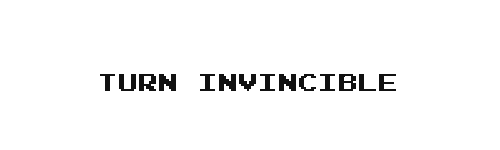
<style>
.page{position:relative;width:500px;height:150px;background:#ffffff}
.page>*{position:absolute;margin:0}
.t1{font:24px "JoystixMonospace-Regular";color:#111111}
</style>
<div class="page">
<p class="t1" style="left:100px;top:74px;width:296px;height:17px">Turn Invincible</p>
</div>
